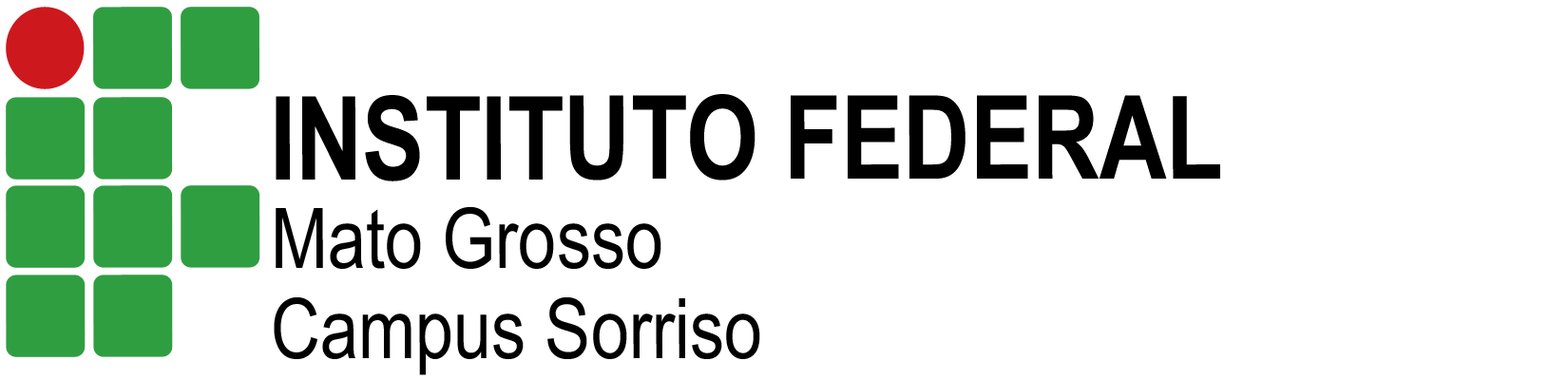
<style>
.page{position:relative;width:1568px;height:380px;background:#ffffff}
.page>*{position:absolute;margin:0}
.t1{font:115.9px "ArialNarrow-Bold";color:#000000}
.t2{font:83.6px "ArialNarrow";color:#000000}
</style>
<div class="page">
<p class="t1" style="left:276px;top:94px;width:944px;height:88px">INSTITUTO FEDERAL</p>
<p class="t2" style="left:276px;top:207px;width:385px;height:62px">Mato Grosso</p>
<p class="t2" style="left:274px;top:297px;width:486px;height:78px">Campus Sorriso</p>
</div>
